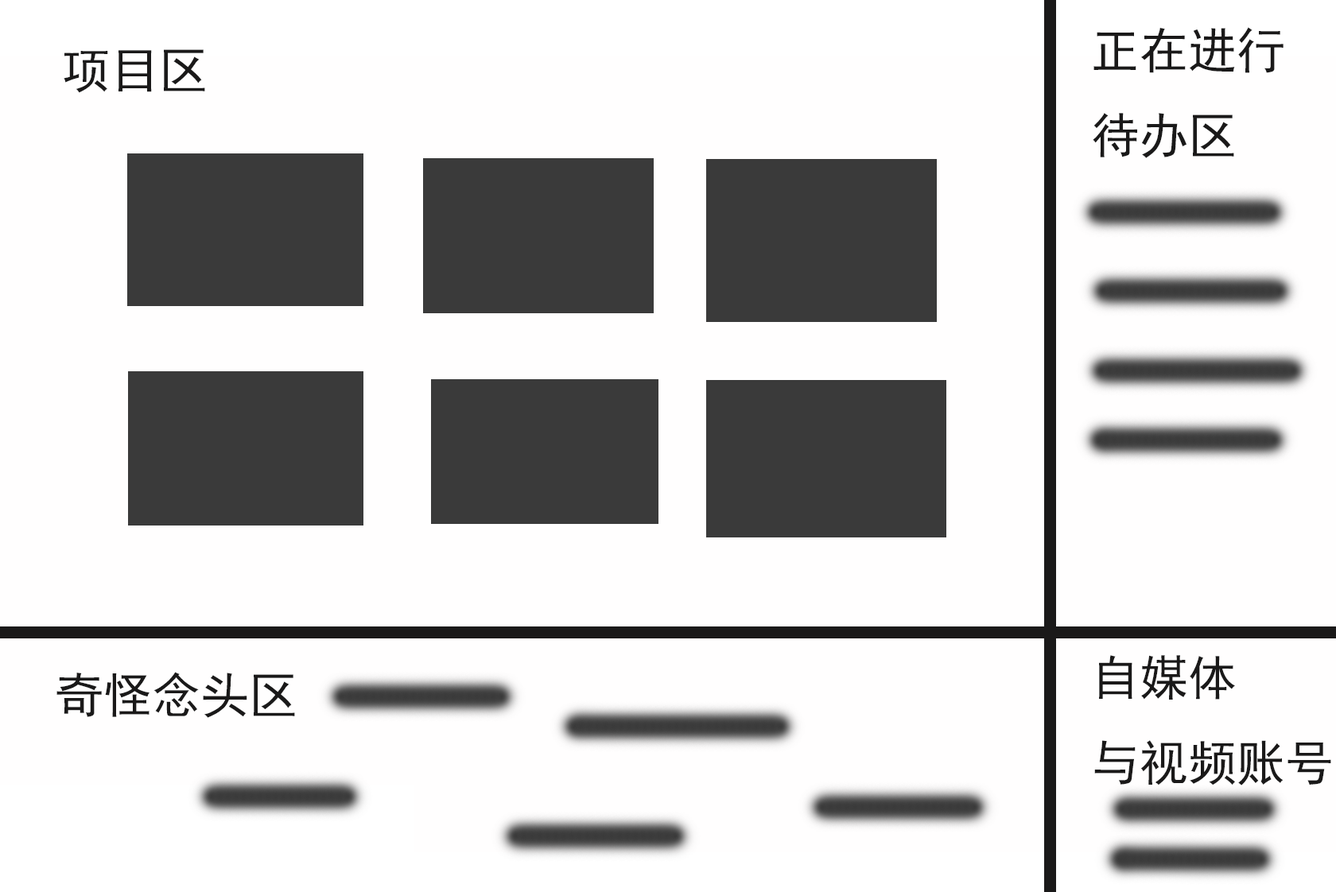
<style>
.page{position:relative;width:1336px;height:892px;background:#fffefe}
.page>*{position:absolute;margin:0}
.t1{font:48.5px "SimHei";color:#1a1919}
</style>
<div class="page">
<p class="t1" style="left:1093px;top:27px;width:191px;height:131px">正在进行<br>待办区</p>
<p class="t1" style="left:64px;top:49px;width:141px;height:44px">项目区</p>
<p class="t1" style="left:1094px;top:655px;width:237px;height:131px">自媒体<br>与视频账号</p>
<p class="t1" style="left:56px;top:672px;width:239px;height:46px">奇怪念头区</p>
</div>
